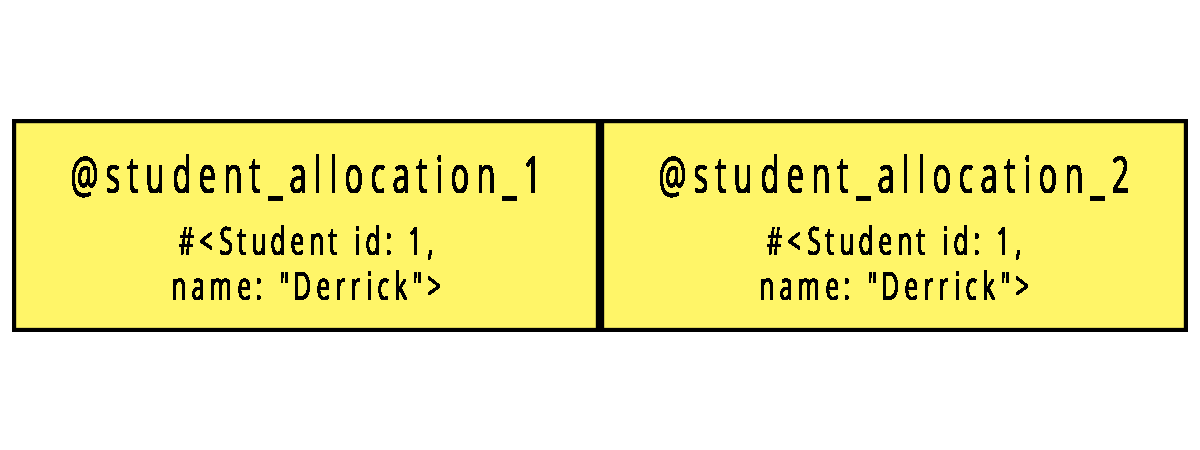
<style>
.page{position:relative;width:1200px;height:450px;background:#ffffff}
.page>*{position:absolute;margin:0}
.t1{font:50px "OpenSans";letter-spacing:0.2em;color:#000000;font-weight:bold;scale:0.63 1}
.t2{font:37.5px "OpenSans";letter-spacing:0.2em;color:#000000;font-weight:bold;scale:0.63 1}
</style>
<div class="page">
<p class="t1" style="left:72px;top:154px;width:463px;height:47px">@student_allocation_1</p>
<p class="t1" style="left:660px;top:154px;width:468px;height:47px">@student_allocation_2</p>
<p class="t2" style="left:173px;top:225px;width:267px;height:75px;text-align:center">#&lt;Student id: 1,<br>name: "Derrick"&gt;</p>
<p class="t2" style="left:761px;top:225px;width:267px;height:75px;text-align:center">#&lt;Student id: 1,<br>name: "Derrick"&gt;</p>
</div>
